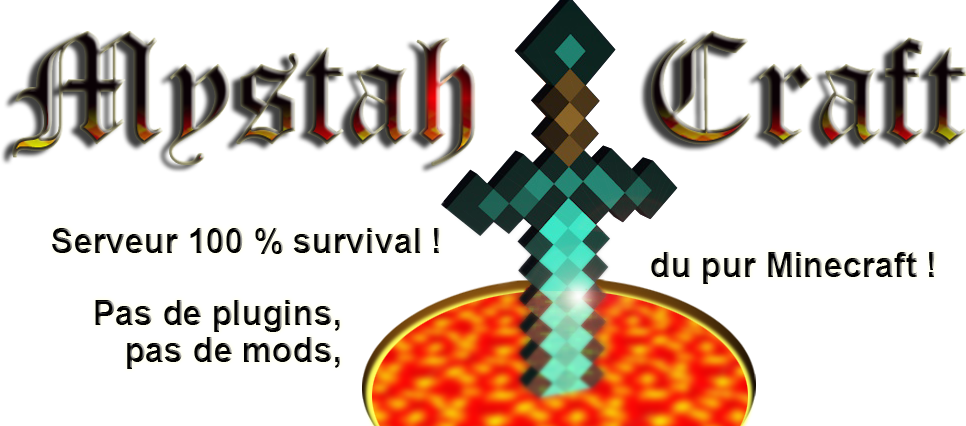
<style>
.page{position:relative;width:966px;height:426px;background:#ffffff}
.page>*{position:absolute;margin:0}
.t1{font:34px "Arial-BoldMT";color:#000000}
.t2{font:34px/37px "Arial-BoldMT";color:#000000}
</style>
<div class="page">
<p class="t1" style="left:52px;top:228px;width:388px;height:26px">Serveur 100 % survival !</p>
<p class="t1" style="left:651px;top:252px;width:284px;height:32px">du pur Minecraft !</p>
<p class="t2" style="left:95px;top:300px;width:245px;height:69px;text-align:right">Pas de plugins, <br>pas de mods,</p>
</div>
